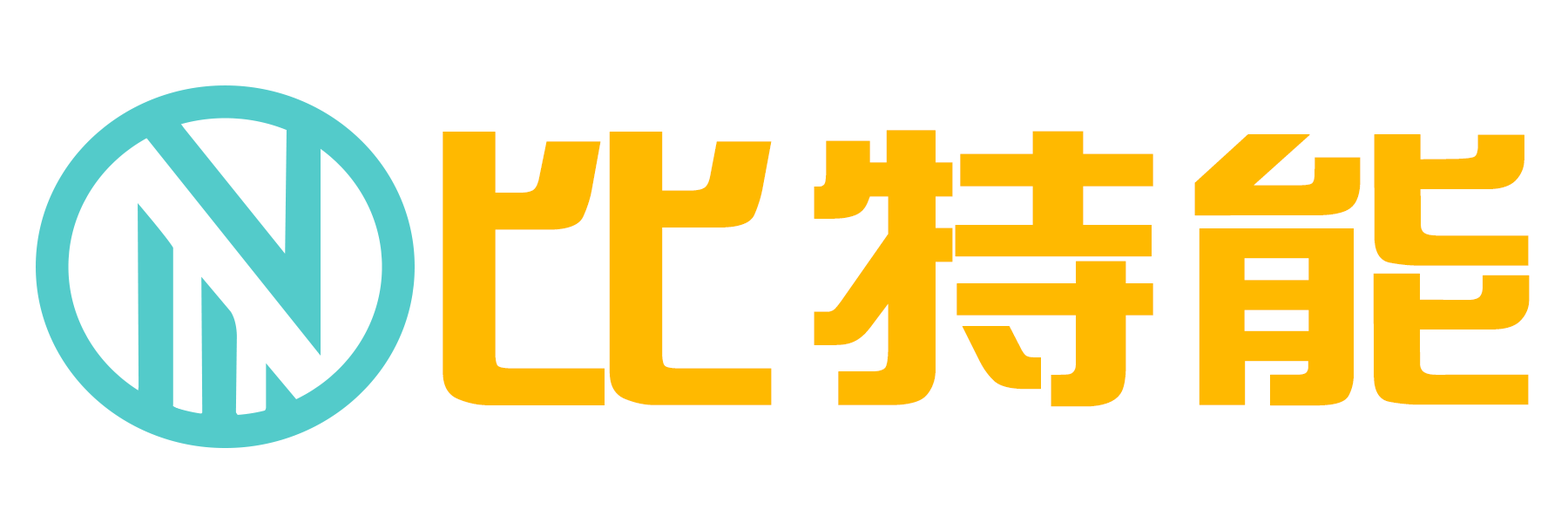
<style>
.page{position:relative;width:1568px;height:523px;background:#ffffff}
.page>*{position:absolute;margin:0}
.t1{font:301.5px "JHRuHeiZhong";letter-spacing:-0.025em;color:#ffb900;font-weight:bold;scale:1.26 1}
</style>
<div class="page">
<p class="t1" style="left:443px;top:130px;width:1087px;height:277px">比特能</p>
</div>
